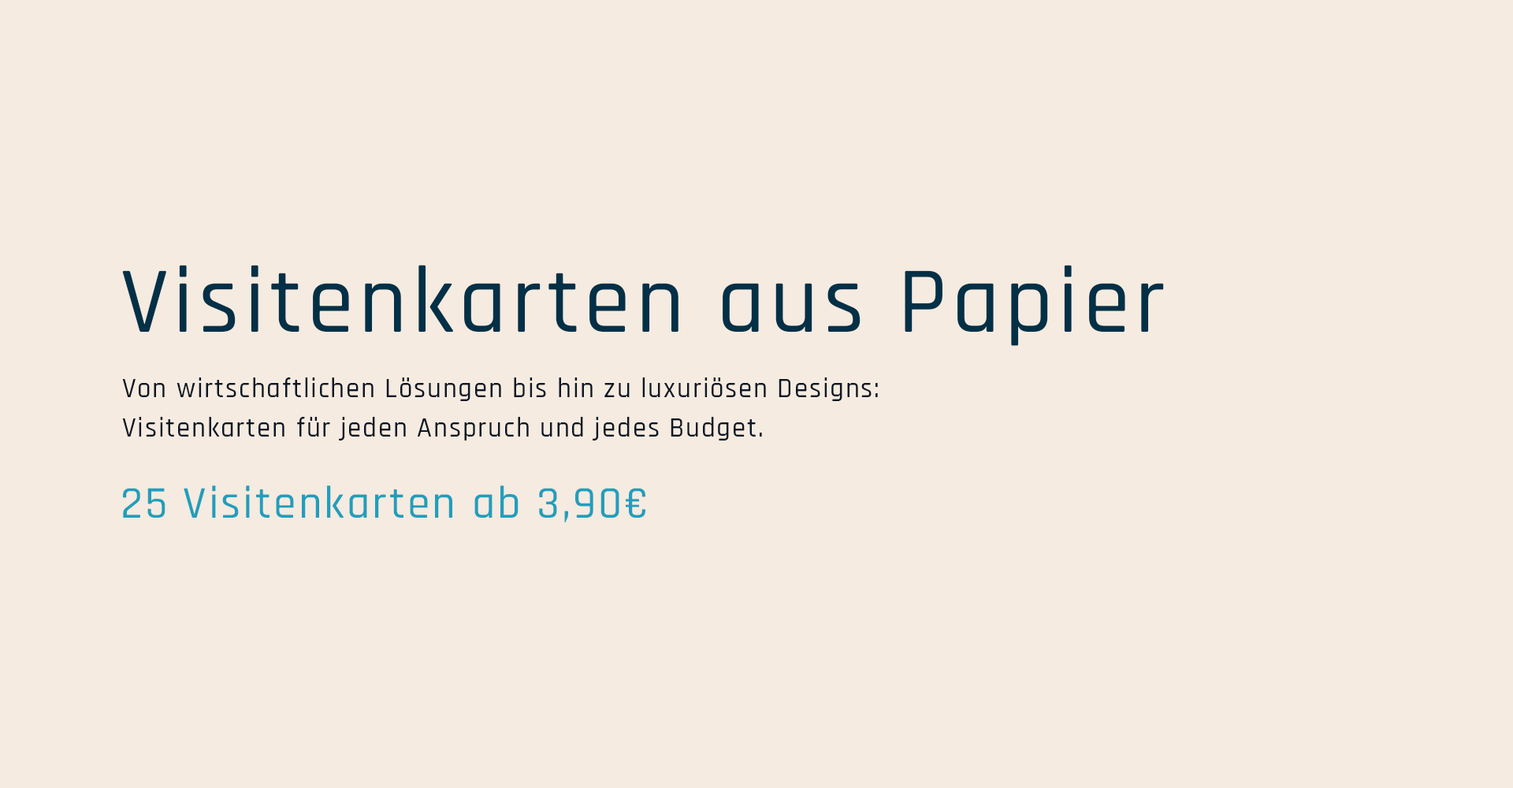
<style>
.page{position:relative;width:1513px;height:788px;background:#f5ebe0}
.page>*{position:absolute;margin:0}
.t1{font:94.6px "Rajdhani-Medium";letter-spacing:0.05em;color:#023047}
.t2{font:27.6px/39.4px "Rajdhani-Medium";letter-spacing:0.05em;color:#0c1725}
.t3{font:45.7px "Rajdhani-Medium";letter-spacing:0.05em;color:#219ebc}
</style>
<div class="page">
<p class="t1" style="left:122px;top:265px;width:1042px;height:81px">Visitenkarten aus Papier</p>
<p class="t2" style="left:122px;top:377px;width:756px;height:64px">Von wirtschaftlichen Lösungen bis hin zu luxuriösen Designs: <br>Visitenkarten für jeden Anspruch und jedes Budget.</p>
<p class="t3" style="left:123px;top:485px;width:522px;height:37px">25 Visitenkarten ab 3,90€</p>
</div>
